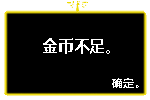
<style>
.page{position:relative;width:150px;height:100px;background:#000000}
.page>*{position:absolute;margin:0}
.t1{font:15.7px "MicrosoftYaHeiUI-Bold";color:#ffffff}
.t2{font:11.2px "MicrosoftYaHeiUI-Bold";color:#ffffff}
</style>
<div class="page">
<p class="t1" style="left:43px;top:38px;width:67px;height:16px">金币不足。</p>
<p class="t2" style="left:112px;top:78px;width:27px;height:10px">确定。</p>
</div>
